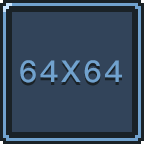
<style>
.page{position:relative;width:144px;height:144px;background:#32445a}
.page>*{position:absolute;margin:0}
.t1{font:30px "PingFang-SC-Bold";letter-spacing:0.1em;color:#71a2ce}
</style>
<div class="page">
<p class="t1" style="left:20px;top:60px;width:102px;height:23px">64X64</p>
</div>
